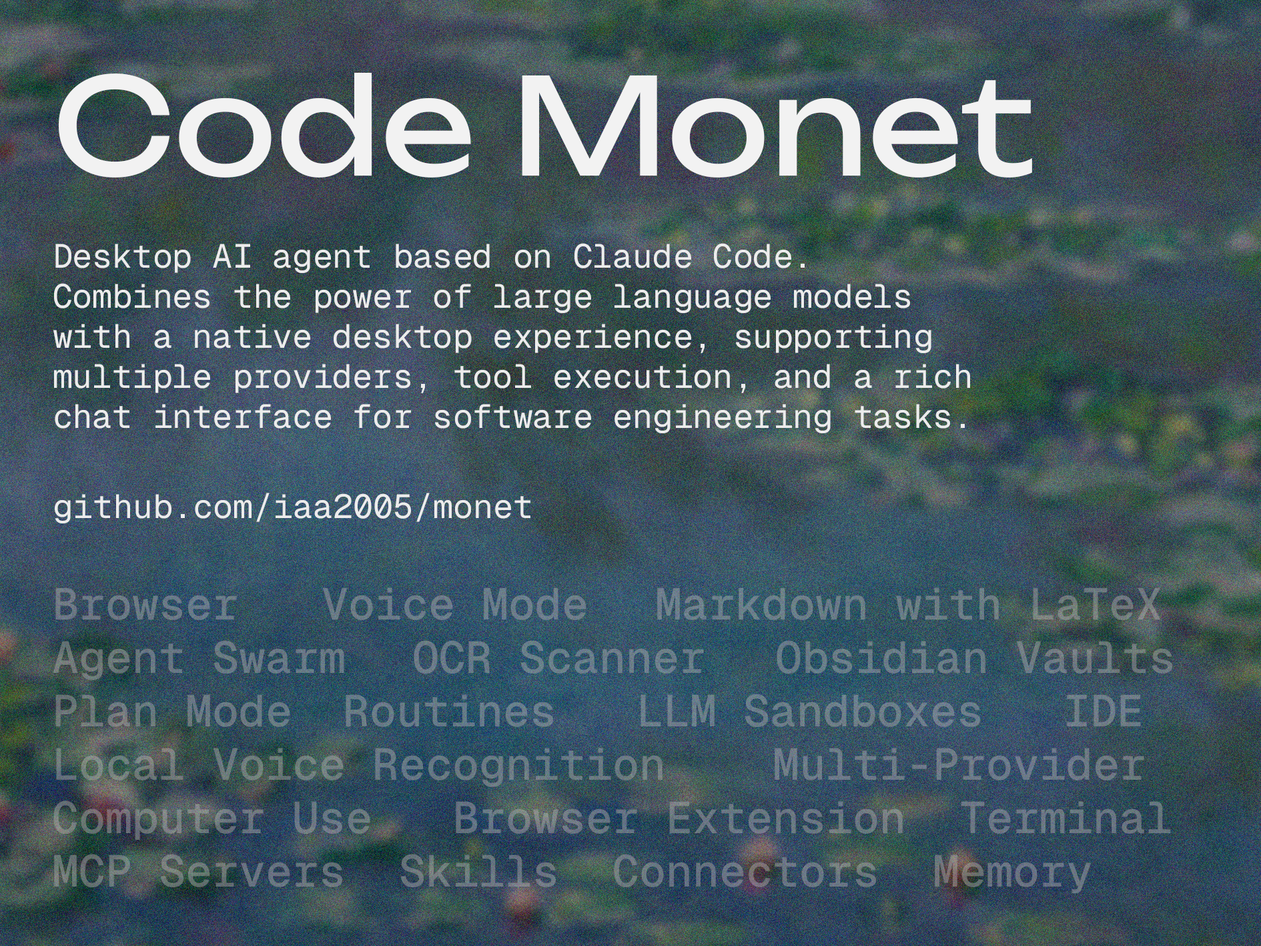
<style>
.page{position:relative;width:1261px;height:946px}
.page>*{position:absolute;margin:0}
.t1{font:133.5px "Bounded-Regular";color:#f2f2f2}
.t2{font:33.4px "GeistMono-Regular";color:#ececec}
.t3{font:44.5px "GeistMono-Medium";color:#6b7a83}
</style>
<div class="page">
<p class="t1" style="left:59px;top:73px;width:973px;height:104px">Code Monet</p>
<p class="t2" style="left:53px;top:243px;width:917px;height:190px">Desktop AI agent based on Claude Code. Combines the power of large language models with a native desktop experience, supporting multiple providers, tool execution, and a rich chat interface for software engineering tasks.</p>
<p class="t2" style="left:55px;top:492px;width:475px;height:31px">github.com/iaa2005/monet</p>
<p class="t3" style="left:53px;top:587px;width:1119px;height:306px">Browser    Voice Mode   Markdown with LaTeX<br>Agent Swarm   OCR Scanner   Obsidian Vaults Plan Mode   Routines    LLM Sandboxes   IDE<br>Local Voice Recognition    Multi-Provider<br>Computer Use   Browser Extension  Terminal<br>MCP Servers  Skills  Connectors  Memory</p>
</div>
